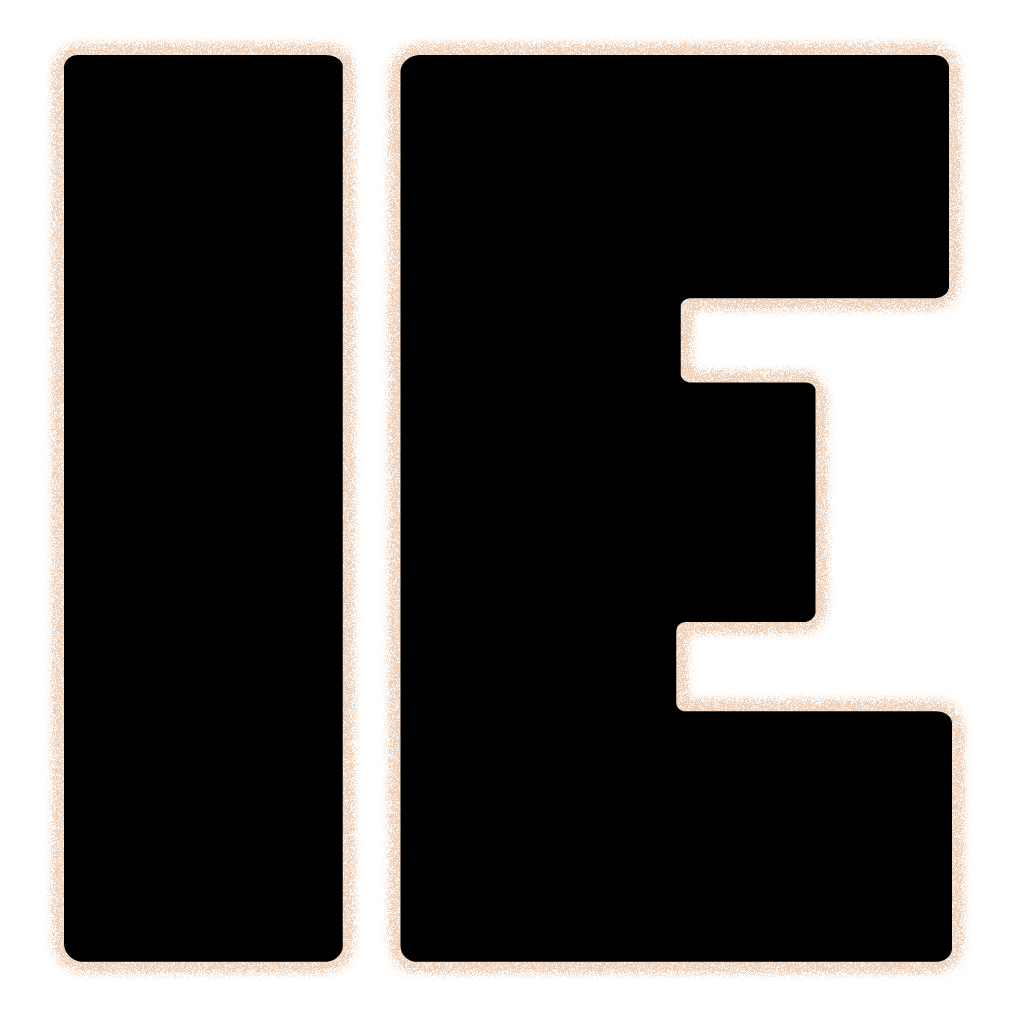
<style>
.page{position:relative;width:1024px;height:1024px;background:#000000}
.page>*{position:absolute;margin:0}
.t1{font:1208.8px "PoplarStd";color:#000000;scale:1.2 1}
</style>
<div class="page">
<p class="t1" style="left:64px;top:55px;width:888px;height:907px">IE</p>
</div>
